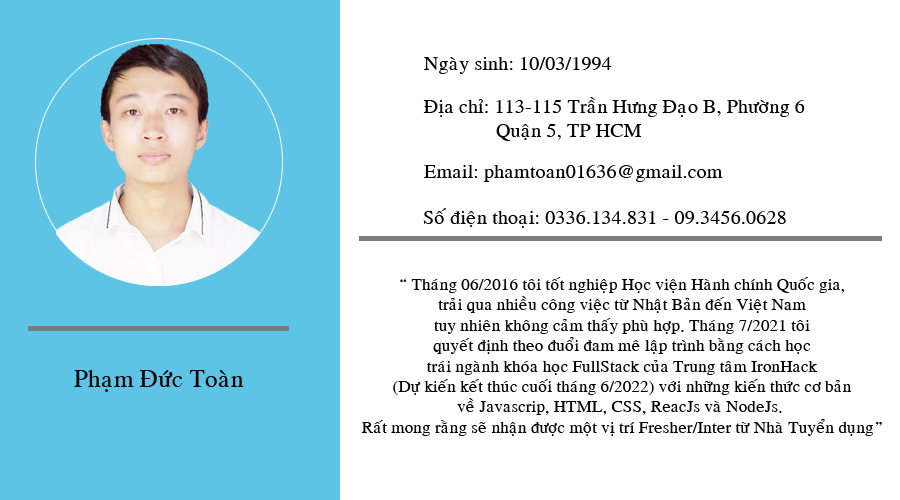
<style>
.page{position:relative;width:900px;height:500px;background:#ffffff}
.page>*{position:absolute;margin:0}
.t1{font:20px "VNI-Times";color:#000000}
.t2{font:17px "VNI-Times";color:#000000}
.t3{font:25px "VNI-Times";color:#000000}
</style>
<div class="page">
<p class="t1" style="left:424px;top:57px;width:188px;height:17px">Ngaøy sinh: 10/03/1994</p>
<p class="t1" style="left:423px;top:97px;width:382px;height:44px">Ñòa chæ: 113-115 Traàn Höng Ñaïo B, Phöôøng 6<br>  Quaän 5, TP HCM</p>
<p class="t1" style="left:424px;top:165px;width:299px;height:17px">Email: phamtoan01636@gmail.com</p>
<p class="t1" style="left:423px;top:208px;width:363px;height:20px">Soá ñieän thoaïi: 0336.134.831 - 09.3456.0628</p>
<p class="t2" style="left:361px;top:277px;width:521px;height:159px;text-align:center">“ Thaùng 06/2016 toâi toát nghieäp Hoïc vieän Haønh chính Quoác gia,<br>traûi qua nhieàu coâng vieäc töø Nhaät Baûn ñeán Vieät Nam<br>tuy nhieân khoâng caûm thaáy phuø hôïp. Thaùng 7/2021 toâi<br>quyeát ñònh theo ñuoåi ñam meâ laäp trình baèng caùch hoïc<br>traùi ngaønh khoùa hoïc FullStack cuûa Trung taâm IronHack<br>(Döï kieán keát thuùc cuoái thaùng 6/2022) vôùi nhöõng kieán thöùc cô baûn<br>veà Javascrip, HTML, CSS, ReacJs vaø NodeJs. <br>Raát mong raèng seõ nhaän ñöôïc moät vò trí Fresher/Inter töø Nhaø Tuyeån duïng”</p>
<p class="t3" style="left:74px;top:370px;width:170px;height:22px">Phaïm Ñöùc Toaøn</p>
</div>
